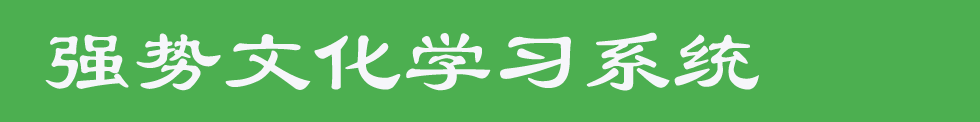
<style>
.page{position:relative;width:980px;height:122px;background:#4caf50}
.page>*{position:absolute;margin:0}
.t1{font:90px "LiSu";color:#f6f6fa}
</style>
<div class="page">
<p class="t1" style="left:45px;top:32px;width:714px;height:59px">强势文化学习系统</p>
</div>
